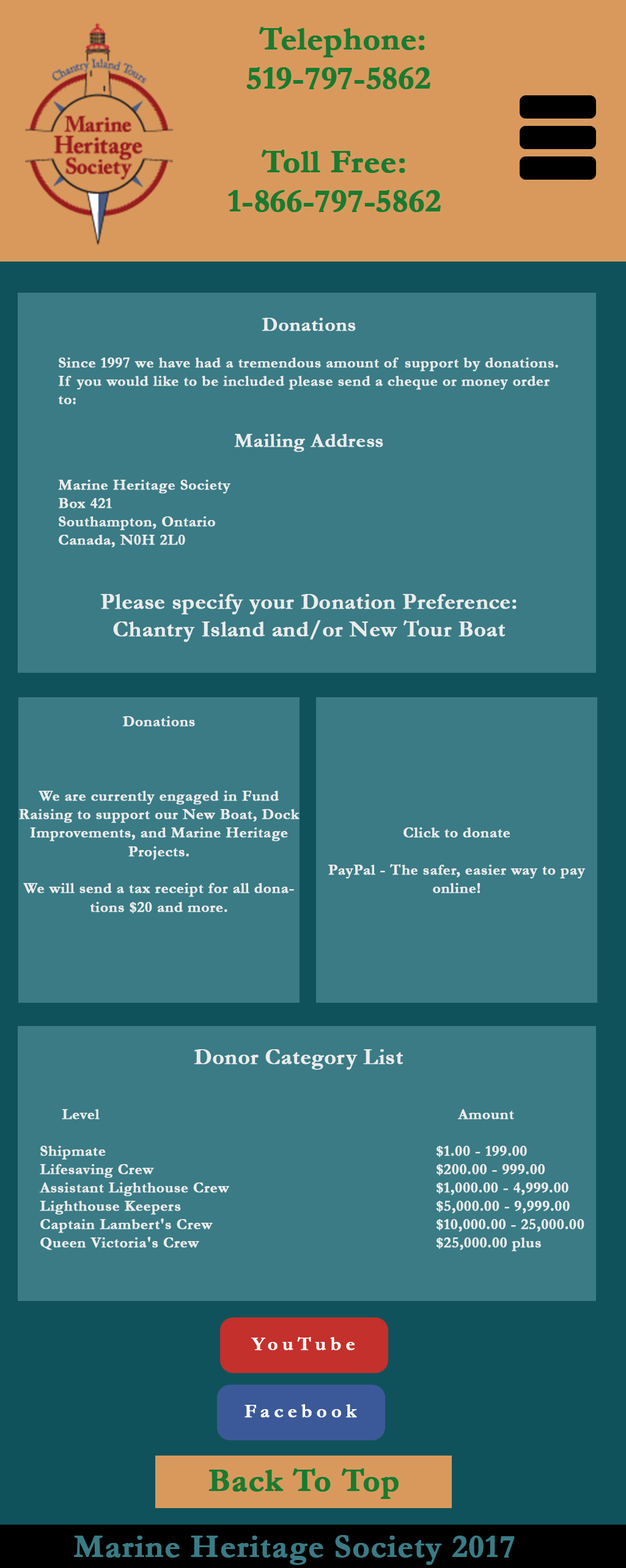
<style>
.page{position:relative;width:626px;height:1568px;background:#3a7b85}
.page>*{position:absolute;margin:0}
.t1{font:32.7px "Garamond-Bold";letter-spacing:-0.01em;color:#197b30;font-weight:bold}
.t2{font:32.7px "Garamond-Bold";color:#197b30;font-weight:bold}
.t3{font:15.3px "Garamond-Bold";color:#ebebeb;font-weight:bold}
.t4{font:20.4px "Garamond-Bold";color:#ebebeb;font-weight:bold}
.t5{font:22.9px "Garamond-Bold";color:#ebebeb;font-weight:bold}
.t6{font:15.5px "Garamond-Bold";color:#ebebeb;font-weight:bold}
.t7{font:19.3px "Garamond-Bold";letter-spacing:0.2em;color:#ffffff;font-weight:bold}
.t8{font:19.3px "Garamond-Bold";letter-spacing:0.2em;color:#fefefe;font-weight:bold}
.t9{font:32.7px "Garamond-Bold";color:#3a7b85;font-weight:bold}
</style>
<div class="page">
<p class="t1" style="left:246px;top:27px;width:184px;height:62px;text-align:center"><span class="t2">Telephone:<br></span>519-797-5862</p>
<p class="t1" style="left:228px;top:150px;width:213px;height:62px;text-align:center"><span class="t2">Toll Free:<br></span>1-866-797-5862</p>
<p class="t3" style="left:58px;top:318px;width:500px;height:324px"><span class="t4"><br>Donations<br></span><br>Since 1997 we have had a tremendous amount of support by donations. If you would like to be included please send a cheque or money order to:<br><br><span class="t4">Mailing Address<br><br></span>Marine Heritage Society<br>Box 421<br>Southampton, Ontario<br>Canada, N0H 2L0<br><br><br><span class="t5">Please specify your Donation Preference:<br>Chantry Island and/or New Tour Boat</span></p>
<p class="t6" style="left:19px;top:716px;width:280px;height:198px;text-align:center">Donations<br><br><br><br>We are currently engaged in Fund Raising to support our New Boat, Dock Improvements, and Marine Heritage Projects.<br><br>We will send a tax receipt for all donations $20 and more.</p>
<p class="t6" style="left:328px;top:827px;width:257px;height:66px;text-align:center">Click to donate<br><br>PayPal - The safer, easier way to pay online!</p>
<p class="t3" style="left:39px;top:1049px;width:545px;height:202px"><span class="t6"><br>        </span><span class="t5">Donor Category List<br>   <br></span><br>  Level                 Amount<br>  <br> Shipmate               $1.00 - 199.00 <br> Lifesaving Crew             $200.00 - 999.00<br> Assistant Lighthouse Crew          $1,000.00 - 4,999.00<br> Lighthouse Keepers            $5,000.00 - 9,999.00<br> Captain Lambert's Crew           $10,000.00 - 25,000.00<br> Queen Victoria's Crew           $25,000.00 plus</p>
<p class="t7" style="left:251px;top:1337px;width:104px;height:13px">YouTube</p>
<p class="t8" style="left:244px;top:1404px;width:113px;height:14px">Facebook</p>
<p class="t2" style="left:208px;top:1468px;width:190px;height:31px">Back To Top</p>
<p class="t9" style="left:74px;top:1535px;width:441px;height:30px">Marine Heritage Society 2017</p>
</div>
